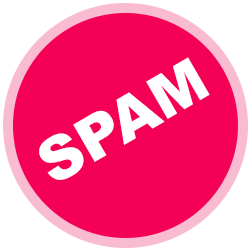
<style>
.page{position:relative;width:250px;height:250px;background:#f50057}
.page>*{position:absolute;margin:0}
.t1{font:60px "Arial-Black";color:#ffffff}
</style>
<div class="page">
<p class="t1" style="left:39px;top:57px;width:171px;height:123px;rotate:-30deg">SPAM</p>
</div>
